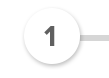
<style>
.page{position:relative;width:109px;height:78px;background:#ffffff}
.page>*{position:absolute;margin:0}
.t1{font:30px "ProximaNova-Bold";letter-spacing:0.08em;color:#606060}
</style>
<div class="page">
<p class="t1" style="left:44px;top:26px;width:11px;height:20px">1</p>
</div>
